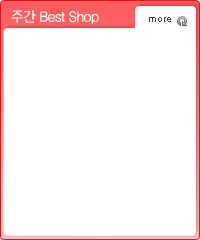
<style>
.page{position:relative;width:200px;height:240px;background:#ffffff}
.page>*{position:absolute;margin:0}
.t1{font:14.8px "YDIYGO330";letter-spacing:-0.025em;color:#ffffff;scale:0.91 1}
.t2{font:10px "ArialMT";color:#424242}
</style>
<div class="page">
<p class="t1" style="left:11px;top:10px;width:88px;height:14px">주간 Best Shop</p>
<p class="t2" style="left:149px;top:17px;width:22px;height:5px">more</p>
</div>
